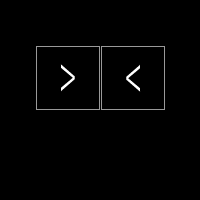
<style>
.page{position:relative;width:200px;height:200px;background:#000000}
.page>*{position:absolute;margin:0}
.t1{font:50.7px "MyriadPro-Regular";color:#ffffff;scale:0.59 1}
</style>
<div class="page">
<p class="t1" style="left:60px;top:64px;width:15px;height:28px">&gt;</p>
<p class="t1" style="left:126px;top:64px;width:15px;height:28px;rotate:180deg">&gt;</p>
</div>
